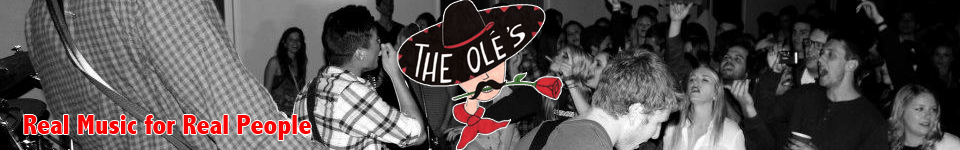
<style>
.page{position:relative;width:960px;height:150px}
.page>*{position:absolute;margin:0}
.t1{font:28px "AbadiMT-CondensedExtraBold";color:#fa0000}
</style>
<div class="page">
<p class="t1" style="left:24px;top:115px;width:287px;height:25px">Real Music for Real People</p>
</div>
